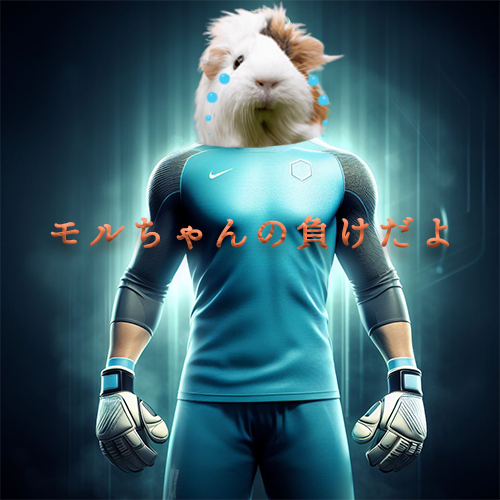
<style>
.page{position:relative;width:500px;height:500px}
.page>*{position:absolute;margin:0}
.t1{font:36px "TenMinchoText-Regular";letter-spacing:0.12em;font-weight:bold}
</style>
<div class="page">
<p class="t1" style="left:50px;top:215px;width:399px;height:35px">モルちゃんの負けだよ</p>
</div>
